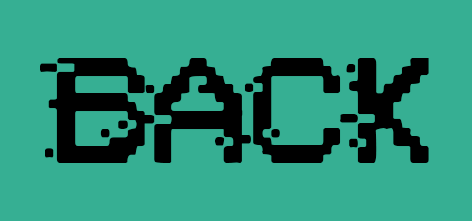
<style>
.page{position:relative;width:472px;height:221px;background:#36af93}
.page>*{position:absolute;margin:0}
.t1{font:150px "PositiveSystem";color:#000000}
</style>
<div class="page">
<p class="t1" style="left:40px;top:58px;width:389px;height:105px">Back</p>
</div>
